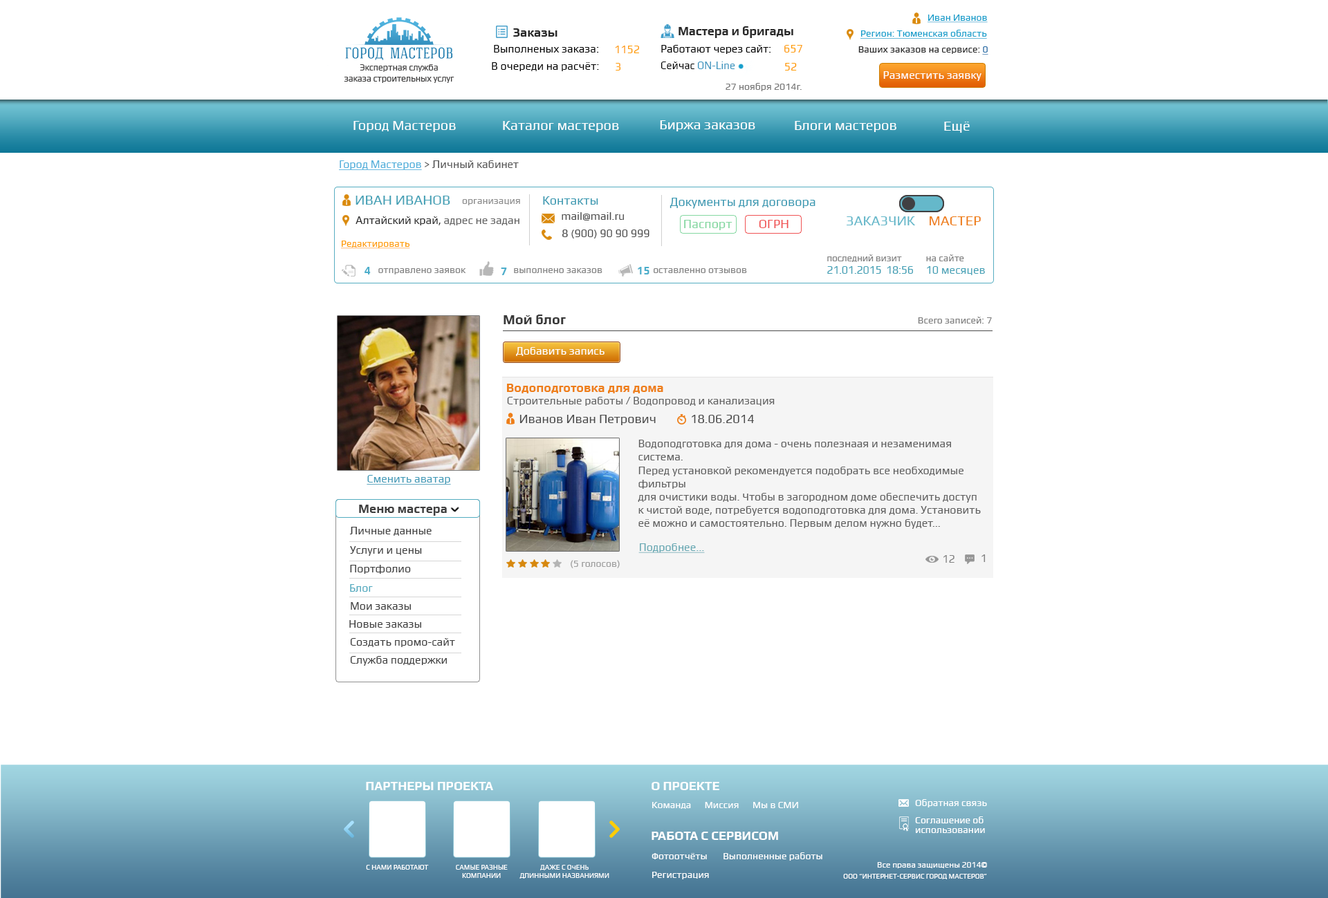
<style>
.page{position:relative;width:1328px;height:898px;background:#ffffff}
.page>*{position:absolute;margin:0}
.t1{font:9.7px "Play";color:#179ecb;text-decoration:underline}
.t2{font:12.4px "Play-Bold";color:#2a2a2a}
.t3{font:12.2px "Play-Bold";color:#2a2a2a}
.t4{font:9.7px "Play";color:#19a0cc;text-decoration:underline}
.t5{font:11.1px "Play";color:#000000}
.t6{font:11px "Play";color:#ff9e07}
.t7{font:11.1px "Play";color:#ff9e07}
.t8{font:9.7px "Play";color:#2a2a2a}
.t9{font:9.7px "Play";color:#226da7;text-decoration:underline}
.t10{font:9px "Play";letter-spacing:-0.016em;color:#403f3f}
.t11{font:11.1px "Play";color:#3c95bf;scale:0.95 1}
.t12{font:11.1px "Play";color:#000000;scale:0.95 1}
.t13{font:11.1px "Play";color:#ffffff}
.t14{font:9.7px "Play";color:#7a7a7a}
.t15{font:13.8px "Play";color:#ffffff}
.t16{font:11.1px "Play";color:#565656}
.t17{font:11.1px "Play";color:#4daeda;text-decoration:underline}
.t18{font:13.8px "Play";color:#45a1b6}
.t19{font:12.4px "Play";color:#3c9ab2}
.t20{font:12.4px "Play";color:#3c9ab3}
.t21{font:9.7px "Play";color:#909090}
.t22{font:11.1px "Play";color:#2d2d2d}
.t23{font:11.1px "Play";color:#616161}
.t24{font:11px "Play";color:#4c4c4c}
.t25{font:12.4px "Play";color:#84d7a1}
.t26{font:12.4px "Play";color:#f05253}
.t27{font:13.8px "Play";color:#65b8ca}
.t28{font:13.8px "Play";color:#ee7e18}
.t29{font:9.7px "Play";color:#ff9e07;text-decoration:underline}
.t30{font:11.2px/12.4px "Play";letter-spacing:-0.02em;color:#45a1b6}
.t31{font:9.8px/12.4px "Play";letter-spacing:-0.02em;color:#848484}
.t32{font:11.2px/12.4px "Play";color:#45a1b6}
.t33{font:9.8px/12.4px "Play";color:#848484}
.t34{font:11px "Play-Bold";color:#4caecb}
.t35{font:9.7px "Play";color:#858585}
.t36{font:13.8px "Play-Bold";color:#393939}
.t37{font:9.7px "Play";color:#828282}
.t38{font:12.4px "Play-Bold";color:#ee7e18}
.t39{font:11.1px "Play";color:#626262}
.t40{font:12.4px "Play";color:#4b4b4b}
.t41{font:11.1px "Play";color:#5f5f5f}
.t42{font:11.1px "Play";color:#439bb8;text-decoration:underline}
.t43{font:12.4px "Play-Bold";color:#3f3f3f}
.t44{font:11.1px "Play";color:#3f3f3f}
.t45{font:11.1px "Play";color:#65a7b2;text-decoration:underline}
.t46{font:11.1px "Play";color:#838383}
.t47{font:9.7px "Play";color:#a1a1a1}
.t48{font:11.1px "Play";color:#50a9be}
.t49{font:10.9px "Play";color:#3f3f3f}
.t50{font:11.3px "Play";color:#3f3f3f}
.t51{font:11px "Play";color:#3f3f3f}
.t52{font:12.4px "Play-Bold";color:#ffffff;text-transform:uppercase}
.t53{font:9.7px "Play";color:#ffffff}
.t54{font:9.7px/6.9px "Play";color:#ffffff}
.t55{font:6.9px "Play";color:#ffffff;text-transform:uppercase}
.t56{font:6.9px/5.5px "Play";color:#ffffff;text-transform:uppercase}
.t57{font:6.9px "Play";color:#ffffff}
.t58{font:8.3px "Play";color:#ffffff}
</style>
<div class="page">
<p class="t1" style="left:927px;top:15px;width:60px;height:8px">Иван Иванов</p>
<p class="t2" style="left:513px;top:28px;width:44px;height:9px">Заказы</p>
<p class="t3" style="left:678px;top:26px;width:115px;height:12px">Мастера и бригады</p>
<p class="t4" style="left:860px;top:30px;width:127px;height:9px">Регион: Тюменская область</p>
<p class="t5" style="left:494px;top:45px;width:105px;height:8px">Выполненых заказа:</p>
<p class="t6" style="left:615px;top:46px;width:24px;height:7px">1152</p>
<p class="t5" style="left:661px;top:45px;width:110px;height:9px">Работают через сайт:</p>
<p class="t7" style="left:784px;top:45px;width:18px;height:8px">657</p>
<p class="t8" style="left:858px;top:46px;width:130px;height:9px">Ваших заказов на сервисе: <span class="t9">0</span></p>
<p class="t10" style="left:344px;top:64px;width:110px;height:19px;text-align:center">Экспертная служба <br>заказа строительных услуг</p>
<p class="t5" style="left:492px;top:62px;width:107px;height:9px">В очереди на расчёт:</p>
<p class="t6" style="left:615px;top:63px;width:6px;height:8px">3</p>
<p class="t11" style="left:660px;top:62px;width:75px;height:7px"><span class="t12">Сейчас </span>ON-Line</p>
<p class="t7" style="left:785px;top:63px;width:12px;height:8px">52</p>
<p class="t13" style="left:883px;top:71px;width:98px;height:10px">Разместить заявку</p>
<p class="t14" style="left:725px;top:83px;width:76px;height:8px">27 ноября 2014г.</p>
<p class="t15" style="left:353px;top:121px;width:103px;height:11px">Город Мастеров</p>
<p class="t15" style="left:503px;top:121px;width:116px;height:11px">Каталог мастеров</p>
<p class="t15" style="left:660px;top:120px;width:95px;height:11px">Биржа заказов</p>
<p class="t15" style="left:794px;top:121px;width:102px;height:11px">Блоги мастеров</p>
<p class="t15" style="left:944px;top:122px;width:25px;height:11px">Ещё</p>
<p class="t16" style="left:339px;top:160px;width:180px;height:10px"><span class="t17">Город Мастеров </span>&gt; Личный кабинет</p>
<p class="t18" style="left:355px;top:196px;width:95px;height:9px">ИВАН ИВАНОВ</p>
<p class="t19" style="left:543px;top:196px;width:55px;height:9px">Контакты</p>
<p class="t20" style="left:669px;top:198px;width:146px;height:11px">Документы для договора</p>
<p class="t21" style="left:462px;top:199px;width:58px;height:6px">организация</p>
<p class="t22" style="left:355px;top:216px;width:164px;height:9px">Алтайский край, <span class="t23">адрес не задан</span></p>
<p class="t24" style="left:561px;top:212px;width:63px;height:9px">mail@mail.ru</p>
<p class="t25" style="left:684px;top:220px;width:48px;height:10px">Паспорт</p>
<p class="t26" style="left:759px;top:220px;width:29px;height:8px">ОГРН</p>
<p class="t27" style="left:846px;top:216px;width:69px;height:9px">ЗАКАЗЧИК</p>
<p class="t28" style="left:929px;top:216px;width:51px;height:9px">МАСТЕР</p>
<p class="t24" style="left:562px;top:230px;width:87px;height:9px">8 (900) 90 90 999</p>
<p class="t29" style="left:341px;top:241px;width:69px;height:8px">Редактировать</p>
<p class="t30" style="left:827px;top:254px;width:86px;height:20px"><span class="t31">последний визит<br></span>21.01.2015  18:56</p>
<p class="t32" style="left:926px;top:254px;width:59px;height:21px"><span class="t33">на сайте<br></span>10 месяцев</p>
<p class="t34" style="left:364px;top:267px;width:7px;height:8px">4</p>
<p class="t35" style="left:378px;top:268px;width:88px;height:7px">отправлено заявок</p>
<p class="t34" style="left:501px;top:268px;width:6px;height:7px">7</p>
<p class="t35" style="left:514px;top:268px;width:88px;height:5px">выполнено заказов</p>
<p class="t34" style="left:638px;top:267px;width:11px;height:8px">15</p>
<p class="t35" style="left:653px;top:268px;width:94px;height:5px">оставленно отзывов</p>
<p class="t36" style="left:503px;top:315px;width:63px;height:9px">Мой блог</p>
<p class="t37" style="left:918px;top:317px;width:74px;height:7px">Всего записей: 7</p>
<p class="t13" style="left:516px;top:347px;width:88px;height:9px">Добавить запись</p>
<p class="t38" style="left:507px;top:384px;width:156px;height:9px">Водоподготовка для дома</p>
<p class="t39" style="left:507px;top:397px;width:267px;height:9px">Строительные работы / Водопровод и канализация</p>
<p class="t40" style="left:519px;top:415px;width:136px;height:10px">Иванов Иван Петрович</p>
<p class="t40" style="left:691px;top:415px;width:63px;height:8px">18.06.2014</p>
<p class="t41" style="left:638px;top:440px;width:342px;height:89px">Водоподготовка для дома - очень полезнаая и незаменимая система.<br>Перед установкой рекомендуется подобрать все необходимые фильтры<br>для очистики воды. Чтобы в загородном доме обеспечить доступ к чистой воде, потребуется водоподготовка для дома. Установить её можно и самостоятельно. Первым делом нужно будет... определиться с фильтрами. После того, как они будут  подобраны, из необходимо установить...</p>
<p class="t42" style="left:366px;top:475px;width:85px;height:10px">Сменить аватар</p>
<p class="t43" style="left:359px;top:505px;width:88px;height:11px">Меню мастера</p>
<p class="t44" style="left:349px;top:527px;width:82px;height:9px">Личные данные</p>
<p class="t45" style="left:638px;top:543px;width:67px;height:10px">Подробнее...</p>
<p class="t44" style="left:350px;top:546px;width:72px;height:10px">Услуги и цены</p>
<p class="t46" style="left:943px;top:555px;width:11px;height:8px">12</p>
<p class="t46" style="left:981px;top:555px;width:4px;height:7px">1</p>
<p class="t44" style="left:350px;top:565px;width:61px;height:9px">Портфолио</p>
<p class="t47" style="left:570px;top:560px;width:50px;height:8px">(5 голосов)</p>
<p class="t48" style="left:350px;top:584px;width:23px;height:8px">Блог</p>
<p class="t49" style="left:351px;top:602px;width:60px;height:8px">Мои заказы</p>
<p class="t50" style="left:349px;top:620px;width:72px;height:8px">Новые заказы</p>
<p class="t51" style="left:350px;top:638px;width:105px;height:9px">Создать промо-сайт</p>
<p class="t44" style="left:350px;top:656px;width:97px;height:10px">Служба поддержки</p>
<p class="t52" style="left:366px;top:782px;width:127px;height:8px">Партнеры проекта</p>
<p class="t52" style="left:651px;top:782px;width:68px;height:8px">О проекте</p>
<p class="t53" style="left:652px;top:802px;width:146px;height:7px">Команда      Миссия      Мы в СМИ</p>
<p class="t53" style="left:915px;top:799px;width:72px;height:9px">Обратная связь</p>
<p class="t54" style="left:915px;top:817px;width:70px;height:16px;text-align:justify">Соглашение об <br>использовании</p>
<p class="t52" style="left:651px;top:832px;width:127px;height:8px">Работа с сервисом</p>
<p class="t53" style="left:651px;top:853px;width:171px;height:8px">Фотоотчёты       Выполненные работы</p>
<p class="t55" style="left:366px;top:865px;width:63px;height:5px">C нами работают</p>
<p class="t56" style="left:456px;top:865px;width:52px;height:13px;text-align:center">Самые разные<br>компании</p>
<p class="t56" style="left:519px;top:865px;width:90px;height:14px;text-align:center">Даже с очень<br>длинными названиями</p>
<p class="t57" style="left:843px;top:862px;width:144px;height:18px;text-align:right"><span class="t58">Все права защищены 2014©<br></span>ООО “ИНТЕРНЕТ-СЕРВИС ГОРОД МАСТЕРОВ”</p>
<p class="t53" style="left:652px;top:872px;width:57px;height:8px">Регистрация</p>
</div>
